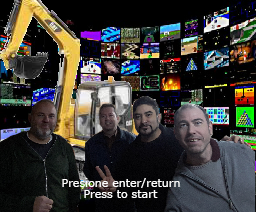
<style>
.page{position:relative;width:256px;height:212px}
.page>*{position:absolute;margin:0}
.t1{font:11px "Verdana";color:#ffffff}
</style>
<div class="page">
<p class="t1" style="left:62px;top:178px;width:118px;height:10px">Presione enter/return</p>
<p class="t1" style="left:84px;top:190px;width:74px;height:8px">Press to start</p>
</div>
